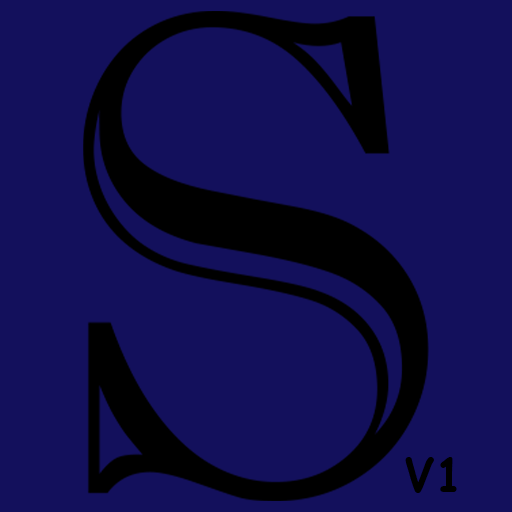
<style>
.page{position:relative;width:512px;height:512px;background:#13105c}
.page>*{position:absolute;margin:0}
.t1{font:45.7px "ComicSansMS-Bold";color:#000000}
</style>
<div class="page">
<p class="t1" style="left:405px;top:457px;width:52px;height:36px">V1</p>
</div>
